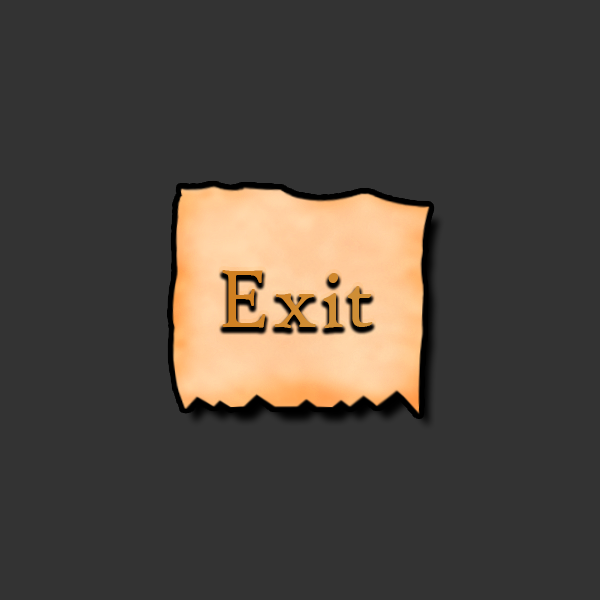
<style>
.page{position:relative;width:600px;height:600px;background:#333333}
.page>*{position:absolute;margin:0}
.t1{font:88.4px "HighTowerText-Reg";color:#cf872c}
</style>
<div class="page">
<p class="t1" style="left:222px;top:270px;width:151px;height:58px">Exit</p>
</div>
